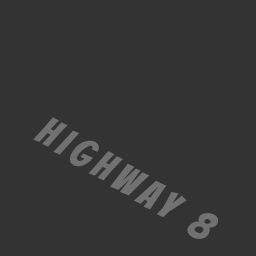
<style>
.page{position:relative;width:256px;height:256px;background:#333333}
.page>*{position:absolute;margin:0}
.t1{font:40px "Bangers-Regular";letter-spacing:0.16em;color:#717171}
</style>
<div class="page">
<p class="t1" style="left:33px;top:117px;width:185px;height:122px;rotate:31deg">HIGHWAY 8</p>
</div>
